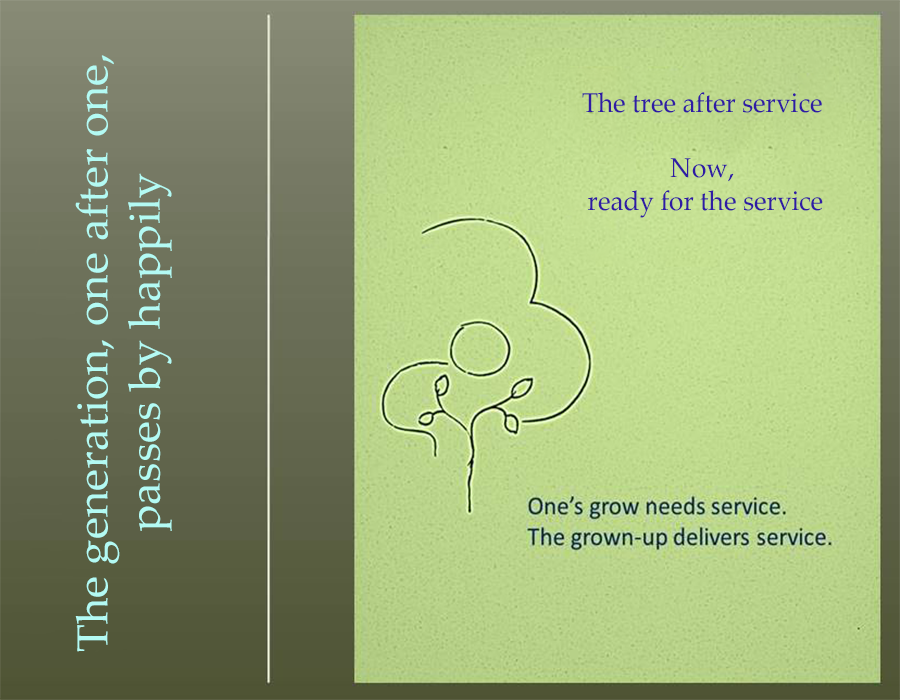
<style>
.page{position:relative;width:900px;height:700px}
.page>*{position:absolute;margin:0}
.t1{font:43.5px "PalatinoLinotype-Roman";color:#b3faf3;scale:1.05 1}
.t2{font:27.4px "PalatinoLinotype-Roman";color:#2f1ca3;scale:0.95 1}
</style>
<div class="page">
<p class="t1" style="left:75px;top:55px;width:97px;height:597px;text-align:center;rotate:-90deg">The generation, one after one,<br> passes by happily</p>
<p class="t2" style="left:582px;top:92px;width:241px;height:126px;text-align:center">The tree after service<br><br>Now,<br> ready for the service</p>
</div>
